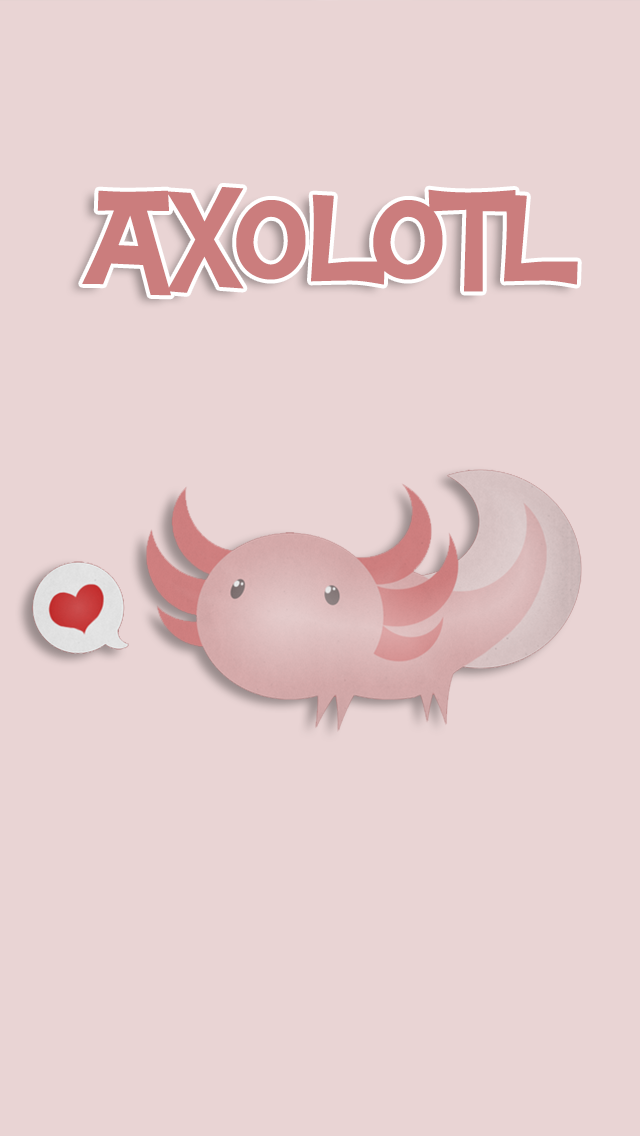
<style>
.page{position:relative;width:640px;height:1136px;background:#e9d4d4}
.page>*{position:absolute;margin:0}
.t1{font:135.8px "SquareMealHearty";letter-spacing:0.005em;color:#cb7d7d;scale:0.8 1}
</style>
<div class="page">
<p class="t1" style="left:82px;top:187px;width:496px;height:109px">Axolotl</p>
</div>
